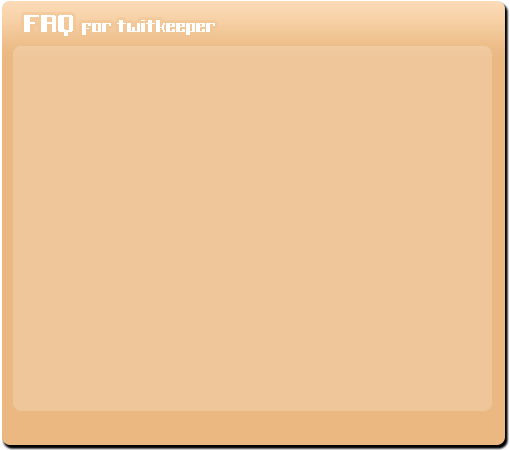
<style>
.page{position:relative;width:510px;height:450px;background:#eec699}
.page>*{position:absolute;margin:0}
.t1{font:16px "BlackWolf";color:#ffffff}
.t2{font:24px "BlackWolf";color:#ffffff}
</style>
<div class="page">
<p class="t1" style="left:24px;top:15px;width:191px;height:21px"><span class="t2">FAQ </span>for twitkeeper</p>
</div>
